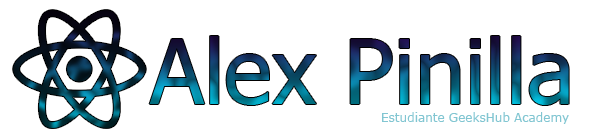
<style>
.page{position:relative;width:600px;height:140px;background:#ffffff}
.page>*{position:absolute;margin:0}
.t1{font:90px "Tahoma"}
.t2{font:12px "Verdana";color:#82c6d2}
</style>
<div class="page">
<p class="t1" style="left:149px;top:36px;width:420px;height:69px">Alex Pinilla</p>
<p class="t2" style="left:382px;top:112px;width:187px;height:12px">Estudiante GeeksHub Academy</p>
</div>
